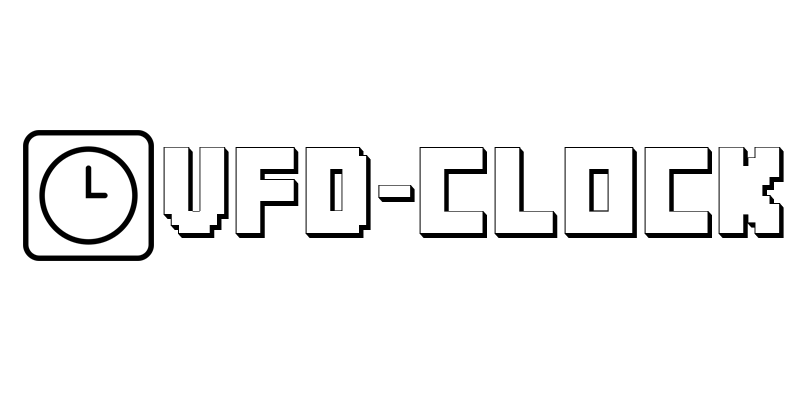
<style>
.page{position:relative;width:800px;height:400px;background:#ffffff}
.page>*{position:absolute;margin:0}
.t1{font:85.3px "MINECRAFTPE";color:#000000}
</style>
<div class="page">
<p class="t1" style="left:163px;top:147px;width:621px;height:91px">VFD-CLOCK</p>
</div>
